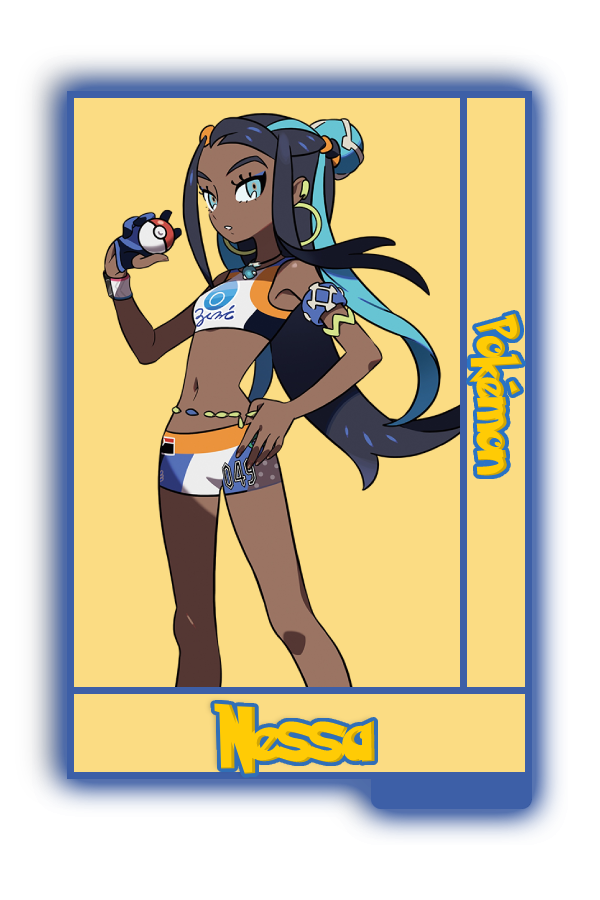
<style>
.page{position:relative;width:600px;height:900px;background:#fbdc83}
.page>*{position:absolute;margin:0}
.t1{font:48.8px "PokemonSolidNormal";color:#ffcb05;scale:0.8 1}
.t2{font:60.1px "PokemonSolidNormal";color:#ffcb05;scale:0.96 1}
</style>
<div class="page">
<p class="t1" style="left:469px;top:313px;width:54px;height:163px;rotate:90deg">Pokémon</p>
<p class="t2" style="left:214px;top:703px;width:161px;height:71px">Nessa</p>
</div>
